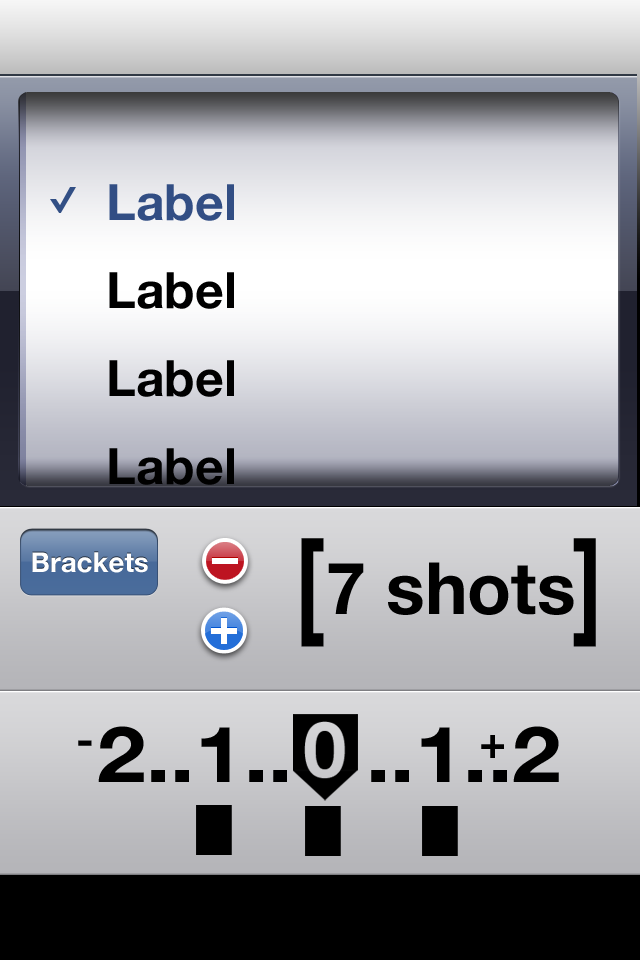
<style>
.page{position:relative;width:640px;height:960px}
.page>*{position:absolute;margin:0}
.t1{font:50px/88px "HelveticaNeue-Bold";color:#000000}
.t2{font:50px/88px "HelveticaNeue-Bold";color:#324e84}
.t3{font:118.8px "HelveticaNeue-Bold";color:#000000;scale:0.69 1}
.t4{font:27.6px "HelveticaNeue-Bold";color:#ffffff}
.t5{font:72px "HelveticaNeue-Bold";color:#000000}
.t6{font:77.8px "HelveticaNeue-Bold";color:#000000;scale:1.13 1}
.t7{font:45.6px "HelveticaNeue-Bold";color:#000000}
.t8{font:43.8px "HelveticaNeue-Bold";color:#000000}
</style>
<div class="page">
<p class="t1" style="left:109px;top:184px;width:125px;height:301px"><span class="t2">Label<br></span>Label<br>Label<br>Label</p>
<p class="t3" style="left:301px;top:538px;width:23px;height:109px">[</p>
<p class="t3" style="left:573px;top:538px;width:23px;height:109px">]</p>
<p class="t4" style="left:32px;top:552px;width:116px;height:21px">Brackets</p>
<p class="t5" style="left:328px;top:562px;width:246px;height:53px">7 shots</p>
<p class="t6" style="left:98px;top:726px;width:461px;height:56px">2..1..   ..1..2</p>
<p class="t7" style="left:481px;top:735px;width:23px;height:23px">+</p>
<p class="t8" style="left:78px;top:740px;width:14px;height:6px">-</p>
</div>
